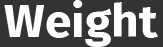
<style>
.page{position:relative;width:163px;height:47px;background:#333333}
.page>*{position:absolute;margin:0}
.t1{font:45.6px "FiraSans-Bold";color:#ffffff;scale:1.05 1}
</style>
<div class="page">
<p class="t1" style="left:4px;top:0px;width:154px;height:47px">Weight</p>
</div>
